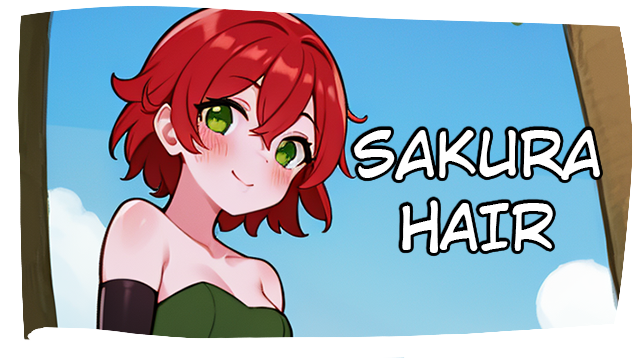
<style>
.page{position:relative;width:638px;height:358px}
.page>*{position:absolute;margin:0}
.t1{font:61px "CCWildWordsRoman";color:#ffffff}
</style>
<div class="page">
<p class="t1" style="left:354px;top:130px;width:246px;height:123px;text-align:center">Sakura<br>HAIR</p>
</div>
